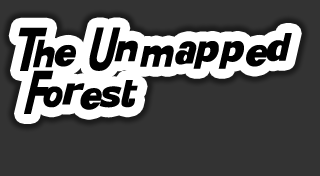
<style>
.page{position:relative;width:320px;height:176px;background:#333333}
.page>*{position:absolute;margin:0}
.t1{font:36px "KittyKatt";color:#000000}
</style>
<div class="page">
<p class="t1" style="left:18px;top:27px;width:274px;height:87px">The Unmapped Forest</p>
</div>
